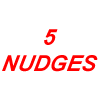
<style>
.page{position:relative;width:100px;height:100px;background:#ffffff}
.page>*{position:absolute;margin:0}
.t1{font:22px "Arial-BoldItalicMT";color:#ff0000;font-style:italic}
</style>
<div class="page">
<p class="t1" style="left:2px;top:29px;width:96px;height:43px;text-align:center">5<br>NUDGES</p>
</div>
